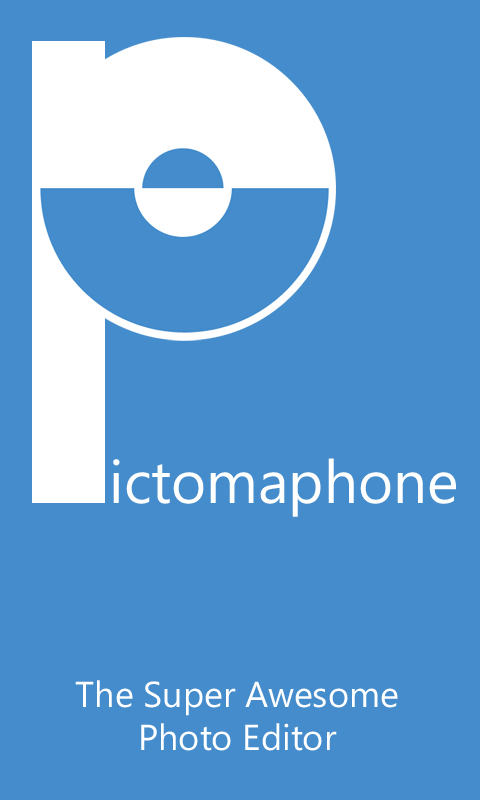
<style>
.page{position:relative;width:480px;height:800px;background:#448ccb}
.page>*{position:absolute;margin:0}
.t1{font:60px "SegoeWP";color:#ffffff}
.t2{font:36px "SegoeWP";color:#ffffff}
</style>
<div class="page">
<p class="t1" style="left:113px;top:458px;width:343px;height:59px">ictomaphone</p>
<p class="t2" style="left:75px;top:680px;width:323px;height:71px;text-align:center">The Super Awesome<br>Photo Editor</p>
</div>
